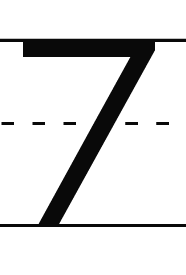
<style>
.page{position:relative;width:186px;height:275px;background:#ffffff}
.page>*{position:absolute;margin:0}
.t1{font:264px "PenmanshipPrint";color:#090909;scale:1.17 1}
</style>
<div class="page">
<p class="t1" style="left:0px;top:38px;width:186px;height:189px">7</p>
</div>
